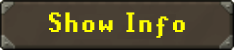
<style>
.page{position:relative;width:234px;height:50px;background:#494034}
.page>*{position:absolute;margin:0}
.t1{font:31.1px "RuneScape-UF";letter-spacing:0.1em;color:#ffff00}
</style>
<div class="page">
<p class="t1" style="left:49px;top:12px;width:136px;height:26px">Show Info</p>
</div>
